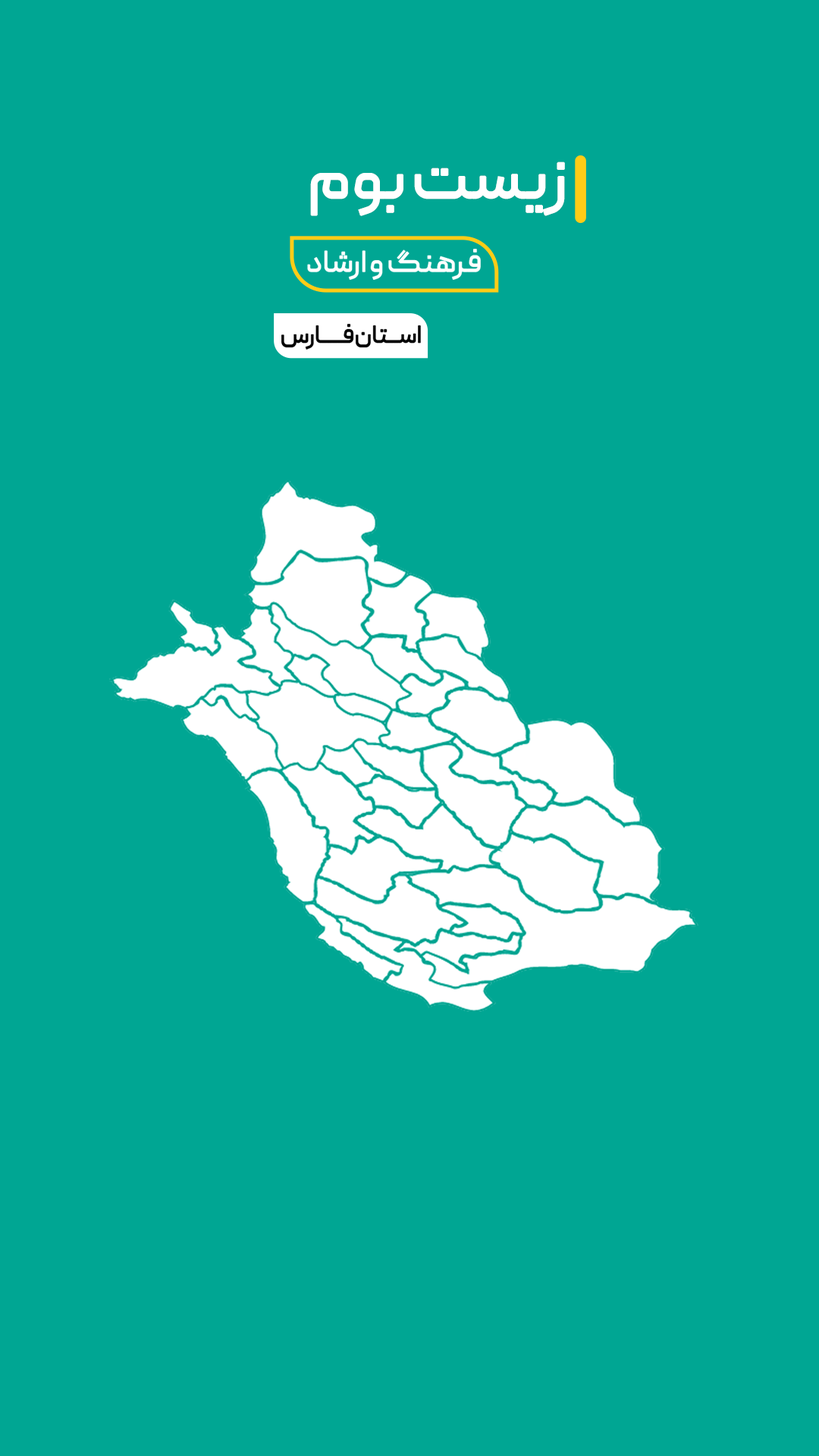
<style>
.page{position:relative;width:819px;height:1456px;background:#00a693}
.page>*{position:absolute;margin:0}
.t1{font:116.6px "Peyda-Regular";letter-spacing:-0.025em;color:#ffffff;font-weight:bold}
.t2{font:53.4px "Peyda-Regular";letter-spacing:-0.025em;color:#ffffff;font-weight:bold}
.t3{font:43.7px "Peyda-Regular";letter-spacing:-0.025em;color:#000000;font-weight:bold}
</style>
<div class="page">
<p class="t1" style="left:310px;top:162px;width:255px;height:54px">زیست بوم</p>
<p class="t2" style="left:307px;top:249px;width:174px;height:31px">فرهنگ و ارشاد</p>
<p class="t3" style="left:281px;top:324px;width:140px;height:26px">اســتان فــــارس</p>
</div>
